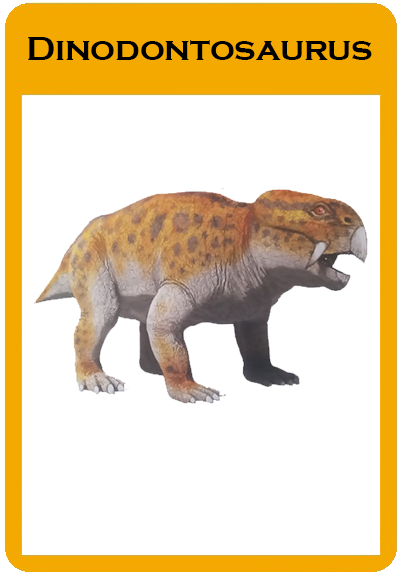
<style>
.page{position:relative;width:400px;height:575px;background:#ffffff}
.page>*{position:absolute;margin:0}
.t1{font:34.7px "CopperplateGothic-Bold";color:#000000}
</style>
<div class="page">
<p class="t1" style="left:28px;top:37px;width:344px;height:23px">Dinodontosaurus</p>
</div>
